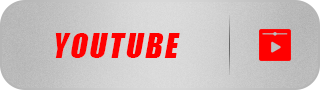
<style>
.page{position:relative;width:320px;height:90px}
.page>*{position:absolute;margin:0}
.t1{font:31px "Impact";letter-spacing:0.08em;color:#ff0000;font-style:italic}
</style>
<div class="page">
<p class="t1" style="left:55px;top:33px;width:125px;height:25px">YOUTUBE</p>
</div>
